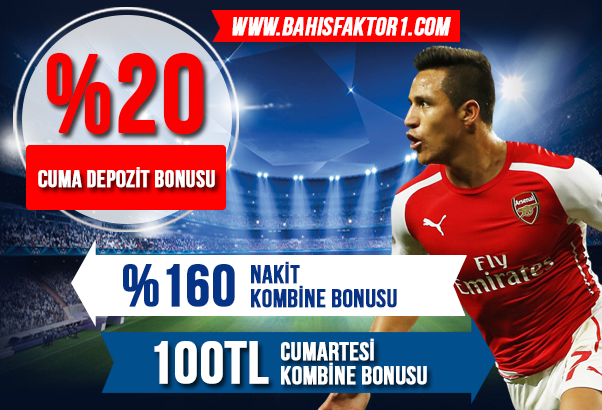
<style>
.page{position:relative;width:602px;height:410px}
.page>*{position:absolute;margin:0}
.t1{font:26px "BebasNeue";color:#ffffff;font-weight:bold;font-style:italic}
.t2{font:110px "BebasNeue";color:#fa0101;font-weight:bold}
.t3{font:24px "BebasNeue";color:#ffffff;font-weight:bold}
.t4{font:60px "BebasNeue";color:#053487;font-weight:bold}
.t5{font:26px/12px "BebasNeue";color:#053487;font-weight:bold}
.t6{font:60px "BebasNeue";color:#ffffff;font-weight:bold}
.t7{font:26px/12px "BebasNeue";color:#ffffff;font-weight:bold}
</style>
<div class="page">
<p class="t1" style="left:232px;top:17px;width:219px;height:19px">WWW.BAHISFAKTOR1.COM</p>
<p class="t2" style="left:46px;top:52px;width:158px;height:83px">%20</p>
<p class="t3" style="left:38px;top:167px;width:177px;height:21px">CUMA depozİT BONUSU</p>
<p class="t4" style="left:123px;top:264px;width:112px;height:43px">%160</p>
<p class="t5" style="left:251px;top:261px;width:146px;height:47px">NAKİT<br>KOMBİNE BONUSU</p>
<p class="t6" style="left:154px;top:341px;width:115px;height:43px">100tl</p>
<p class="t7" style="left:281px;top:338px;width:146px;height:47px">cumartesİ<br>KOMBİNE BONUSU</p>
</div>
